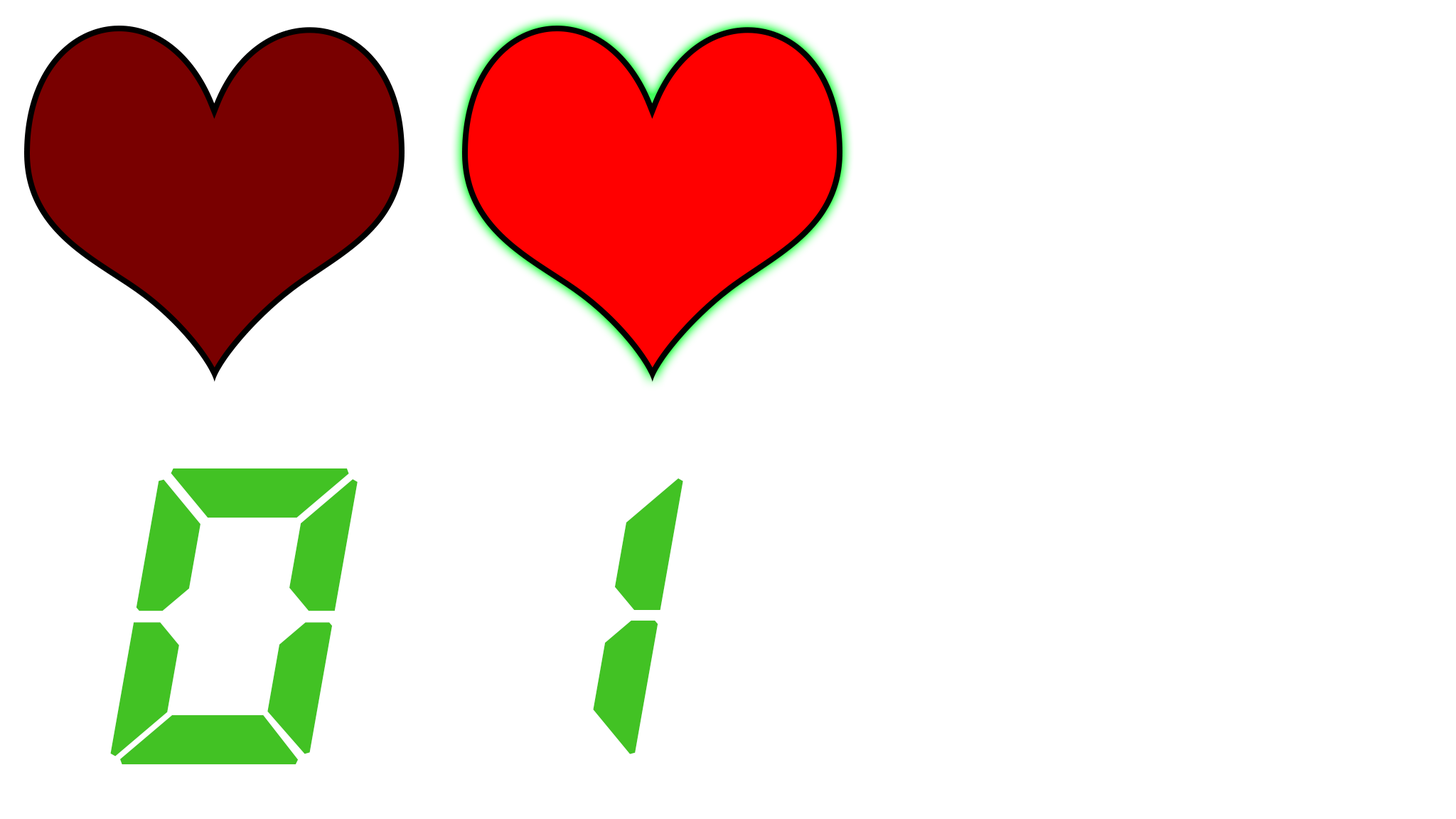
<style>
.page{position:relative;width:1456px;height:819px;background:#ffffff}
.page>*{position:absolute;margin:0}
.t1{font:413.8px "QuartzMS";letter-spacing:-0.025em;color:#42c224;text-transform:uppercase;font-weight:bold;font-style:italic}
</style>
<div class="page">
<p class="t1" style="left:110px;top:468px;width:248px;height:297px">0</p>
<p class="t1" style="left:593px;top:478px;width:90px;height:276px">1</p>
</div>
